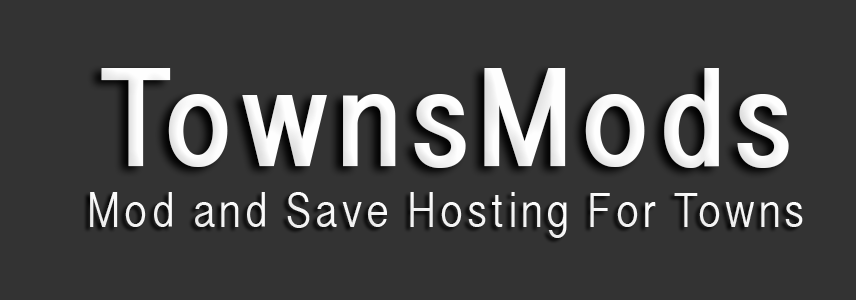
<style>
.page{position:relative;width:856px;height:300px;background:#333333}
.page>*{position:absolute;margin:0}
.t1{font:142px "GurmukhiSangamMN-Bold";letter-spacing:0.1em;color:#fefefe;scale:0.85 1}
.t2{font:50px "GurmukhiSangamMN";letter-spacing:0.1em;color:#fefefe;scale:0.85 1}
</style>
<div class="page">
<p class="t1" style="left:101px;top:68px;width:688px;height:100px">TownsMods</p>
<p class="t2" style="left:90px;top:192px;width:713px;height:46px">Mod and Save Hosting For Towns</p>
</div>
